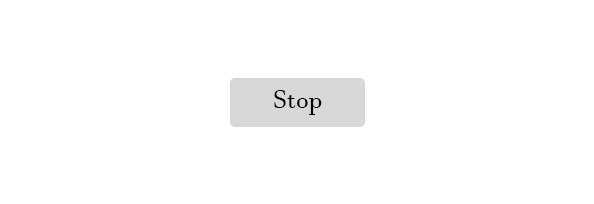
<style>
.page{position:relative;width:594px;height:204px;background:#ffffff}
.page>*{position:absolute;margin:0}
.t1{font:25px "JavaneseText";color:#000000}
</style>
<div class="page">
<p class="t1" style="left:274px;top:90px;width:48px;height:25px">Stop</p>
</div>
